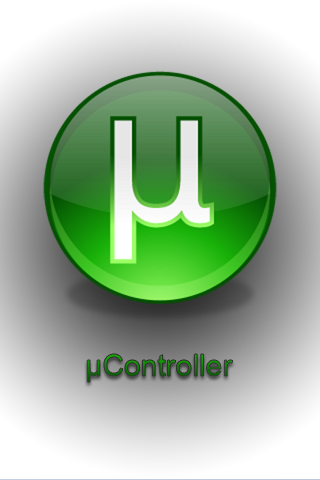
<style>
.page{position:relative;width:320px;height:480px}
.page>*{position:absolute;margin:0}
.t1{font:30px "ArialMT"}
</style>
<div class="page">
<p class="t1" style="left:87px;top:354px;width:146px;height:28px">μController</p>
</div>
